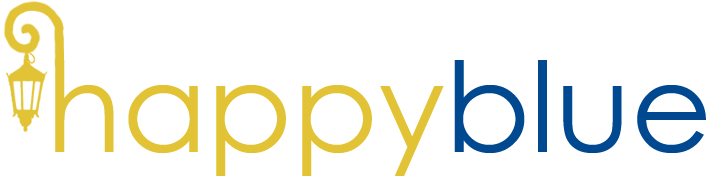
<style>
.page{position:relative;width:713px;height:185px;background:#ffffff}
.page>*{position:absolute;margin:0}
.t1{font:125px "CenturyGothic";color:#e1c335}
.t2{font:125px "CenturyGothic";color:#004990}
</style>
<div class="page">
<p class="t1" style="left:55px;top:60px;width:651px;height:116px">happy<span class="t2">blue</span></p>
</div>
